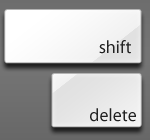
<style>
.page{position:relative;width:150px;height:140px}
.page>*{position:absolute;margin:0}
.t1{font:18px "MyriadPro-Regular";color:#222222}
</style>
<div class="page">
<p class="t1" style="left:99px;top:40px;width:32px;height:14px">shift</p>
<p class="t1" style="left:90px;top:108px;width:46px;height:14px">delete</p>
</div>
